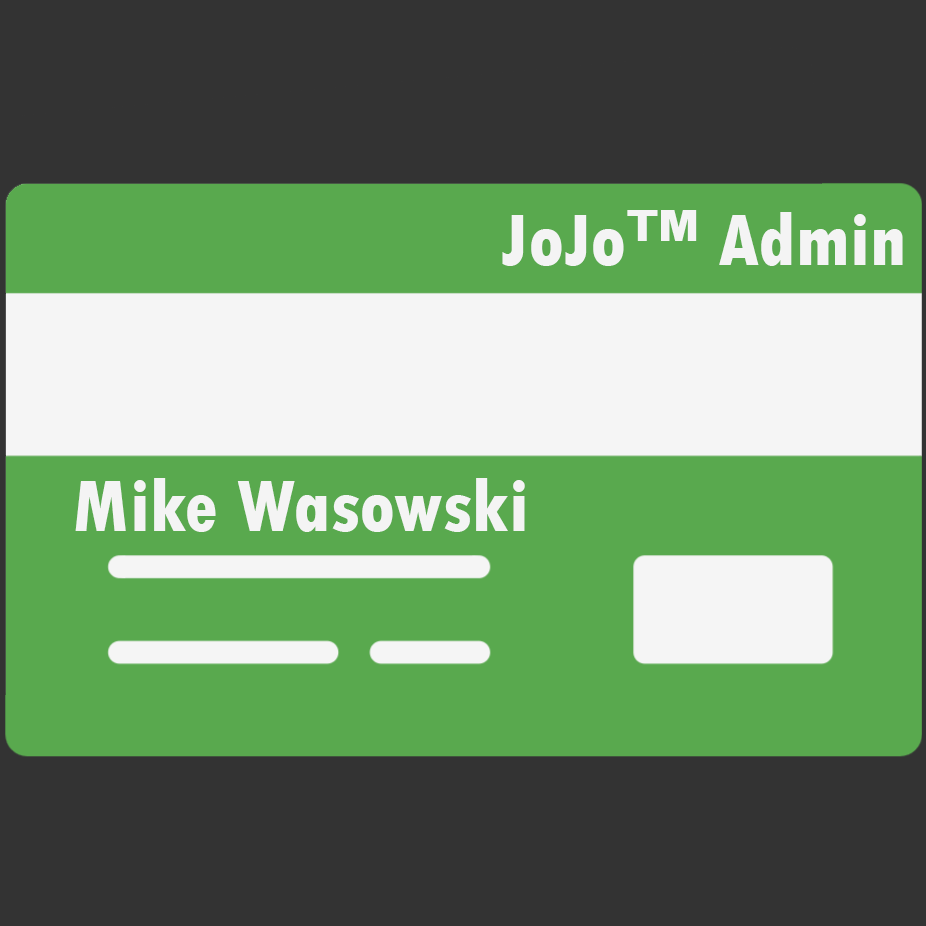
<style>
.page{position:relative;width:926px;height:926px;background:#333333}
.page>*{position:absolute;margin:0}
.t1{font:77.4px "TwCenMT-CondensedExtraBold";color:#f4f4f4}
</style>
<div class="page">
<p class="t1" style="left:502px;top:210px;width:401px;height:56px">JoJo™ Admin</p>
<p class="t1" style="left:75px;top:478px;width:450px;height:54px">Mike Wasowski</p>
</div>
